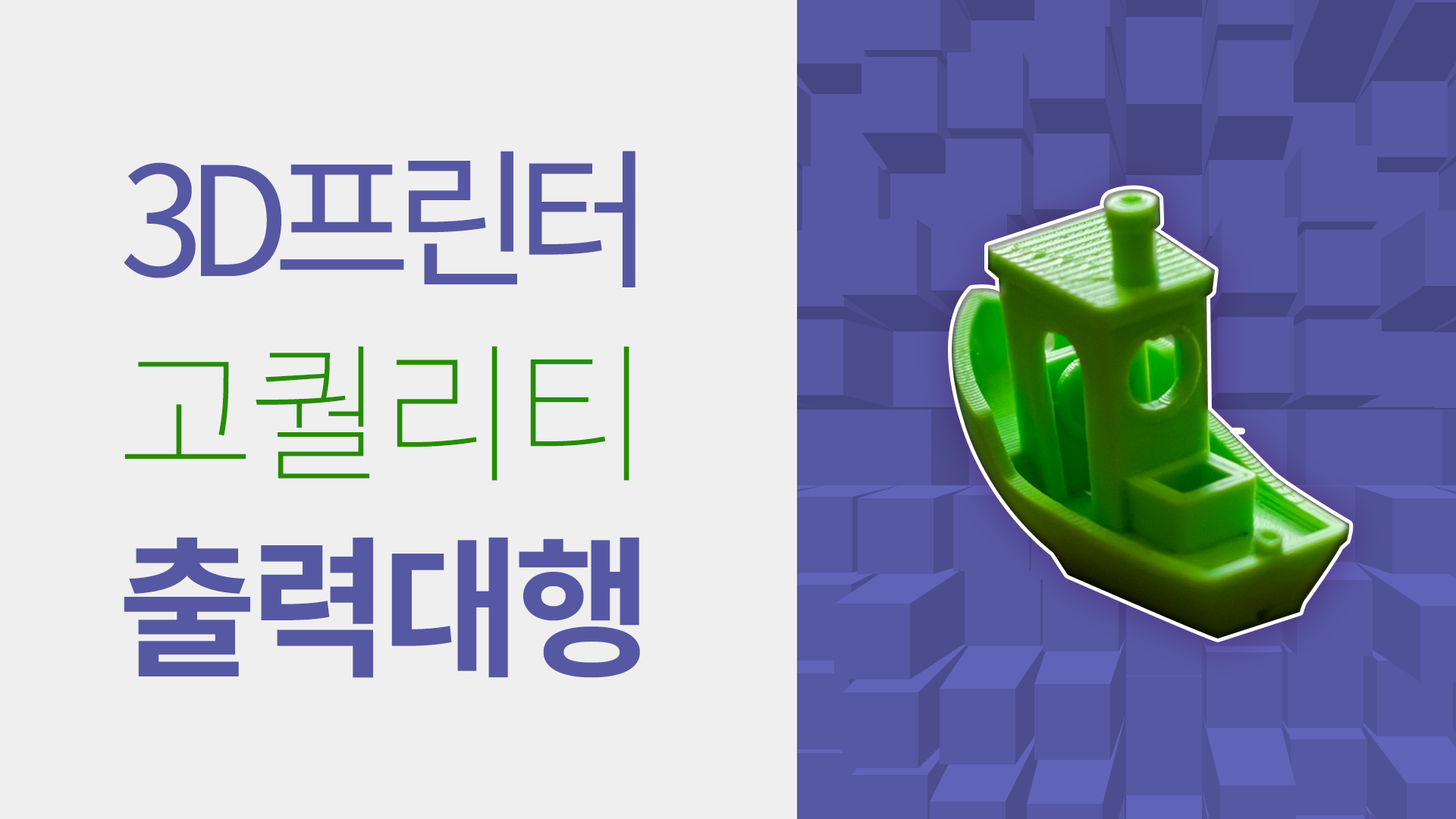
<style>
.page{position:relative;width:1456px;height:819px;background:#efefef}
.page>*{position:absolute;margin:0}
.t1{font:151.7px "NotoSansKR-Regular";letter-spacing:-0.12em;color:#5658a3}
.t2{font:151.7px "NotoSansKR-Thin";letter-spacing:-0.05em;color:#258d03}
.t3{font:151.7px "NotoSansKR-Bold";letter-spacing:-0.05em;color:#5658a3}
</style>
<div class="page">
<p class="t1" style="left:124px;top:151px;width:511px;height:136px">3D프린터</p>
<p class="t2" style="left:124px;top:346px;width:505px;height:135px">고퀄리티</p>
<p class="t3" style="left:124px;top:537px;width:516px;height:141px">출력대행</p>
</div>
